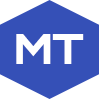
<style>
.page{position:relative;width:99px;height:99px;background:#3550b7}
.page>*{position:absolute;margin:0}
.t1{font:41.7px "Orbitron-Black";color:#ffffff}
</style>
<div class="page">
<p class="t1" style="left:16px;top:34px;width:68px;height:30px">MT</p>
</div>
